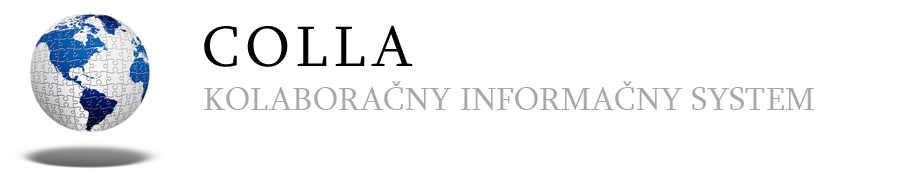
<style>
.page{position:relative;width:920px;height:180px;background:#ffffff}
.page>*{position:absolute;margin:0}
.t1{font:58.3px "Sylfaen";letter-spacing:0.1em;color:#000000}
.t2{font:33.3px "Sylfaen";color:#a8a8a8}
</style>
<div class="page">
<p class="t1" style="left:204px;top:25px;width:209px;height:42px">COLLA</p>
<p class="t2" style="left:204px;top:81px;width:610px;height:29px">KOLABORAČNY INFORMAČNY SYSTEM</p>
</div>
